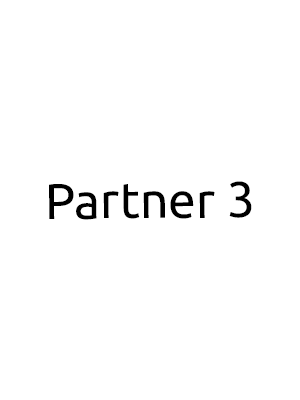
<style>
.page{position:relative;width:300px;height:400px;background:#ffffff}
.page>*{position:absolute;margin:0}
.t1{font:50px "Ubuntu";color:#000000}
</style>
<div class="page">
<p class="t1" style="left:49px;top:181px;width:203px;height:39px">Partner 3</p>
</div>
